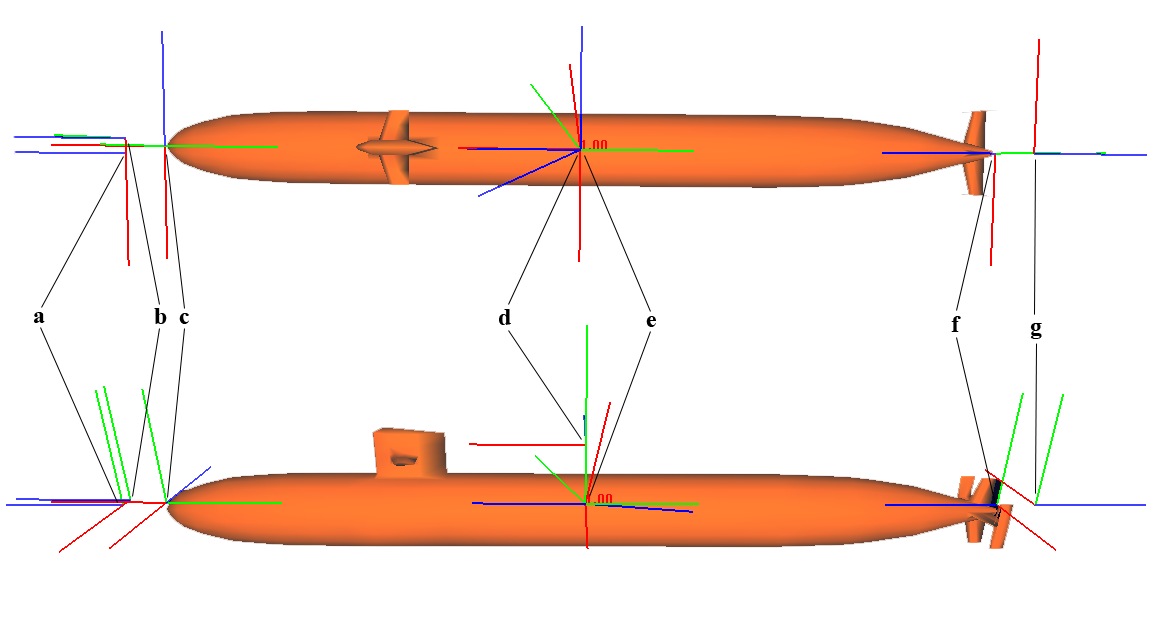
<style>
.page{position:relative;width:1171px;height:622px;background:#ffffff}
.page>*{position:absolute;margin:0}
.t1{font:24px "TimesNewRomanPS-BoldMT";color:#000000}
</style>
<div class="page">
<p class="t1" style="left:34px;top:312px;width:11px;height:11px">a</p>
<p class="t1" style="left:154px;top:308px;width:13px;height:16px">b</p>
<p class="t1" style="left:179px;top:313px;width:10px;height:11px">c</p>
<p class="t1" style="left:499px;top:309px;width:12px;height:16px">d</p>
<p class="t1" style="left:646px;top:316px;width:10px;height:11px">e</p>
<p class="t1" style="left:951px;top:316px;width:10px;height:16px">f</p>
<p class="t1" style="left:1030px;top:323px;width:12px;height:16px">g</p>
</div>
